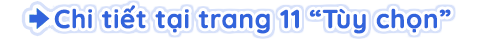
<style>
.page{position:relative;width:480px;height:42px;background:#ffffff}
.page>*{position:absolute;margin:0}
.t1{font:26px "Quicksand-Bold";color:#3264dc;font-weight:bold}
</style>
<div class="page">
<p class="t1" style="left:54px;top:5px;width:397px;height:29px">Chi tiết tại trang 11 “Tùy chọn”</p>
</div>
